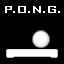
<style>
.page{position:relative;width:64px;height:64px;background:#000000}
.page>*{position:absolute;margin:0}
.t1{font:13.3px "BankGothicBT-Medium";color:#ffffff}
</style>
<div class="page">
<p class="t1" style="left:5px;top:6px;width:55px;height:7px">P.O.N.G.</p>
</div>
